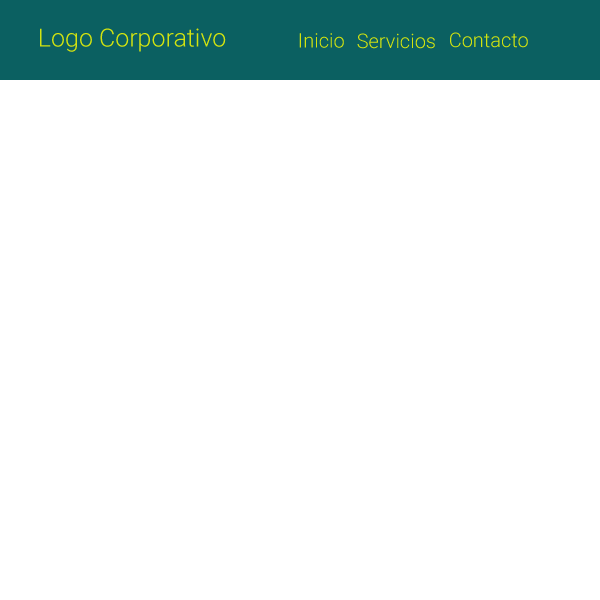
<style>
.page{position:relative;width:600px;height:600px;background:#ffffff}
.page>*{position:absolute;margin:0}
.t1{font:25px "Roboto-Light";color:#d2e30f}
.t2{font:20px "Roboto-Light";color:#d2e30f}
</style>
<div class="page">
<p class="t1" style="left:40px;top:28px;width:186px;height:24px">Logo Corporativo</p>
<p class="t2" style="left:299px;top:33px;width:45px;height:15px">Inicio</p>
<p class="t2" style="left:357px;top:33px;width:78px;height:16px">Servicios</p>
<p class="t2" style="left:450px;top:32px;width:78px;height:16px">Contacto</p>
</div>
